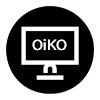
<style>
.page{position:relative;width:100px;height:100px;background:#000000}
.page>*{position:absolute;margin:0}
.t1{font:14.6px "AcuminConcept-Regular";letter-spacing:0.01em;color:#fdfafa;font-style:italic}
</style>
<div class="page">
<p class="t1" style="left:32px;top:39px;width:35px;height:12px">OiKO</p>
</div>
